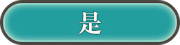
<style>
.page{position:relative;width:180px;height:45px;background:#239e9f}
.page>*{position:absolute;margin:0}
.t1{font:24px "RyuminPr6N-ExBold";color:#fff6f1}
</style>
<div class="page">
<p class="t1" style="left:78px;top:11px;width:24px;height:23px">是</p>
</div>
